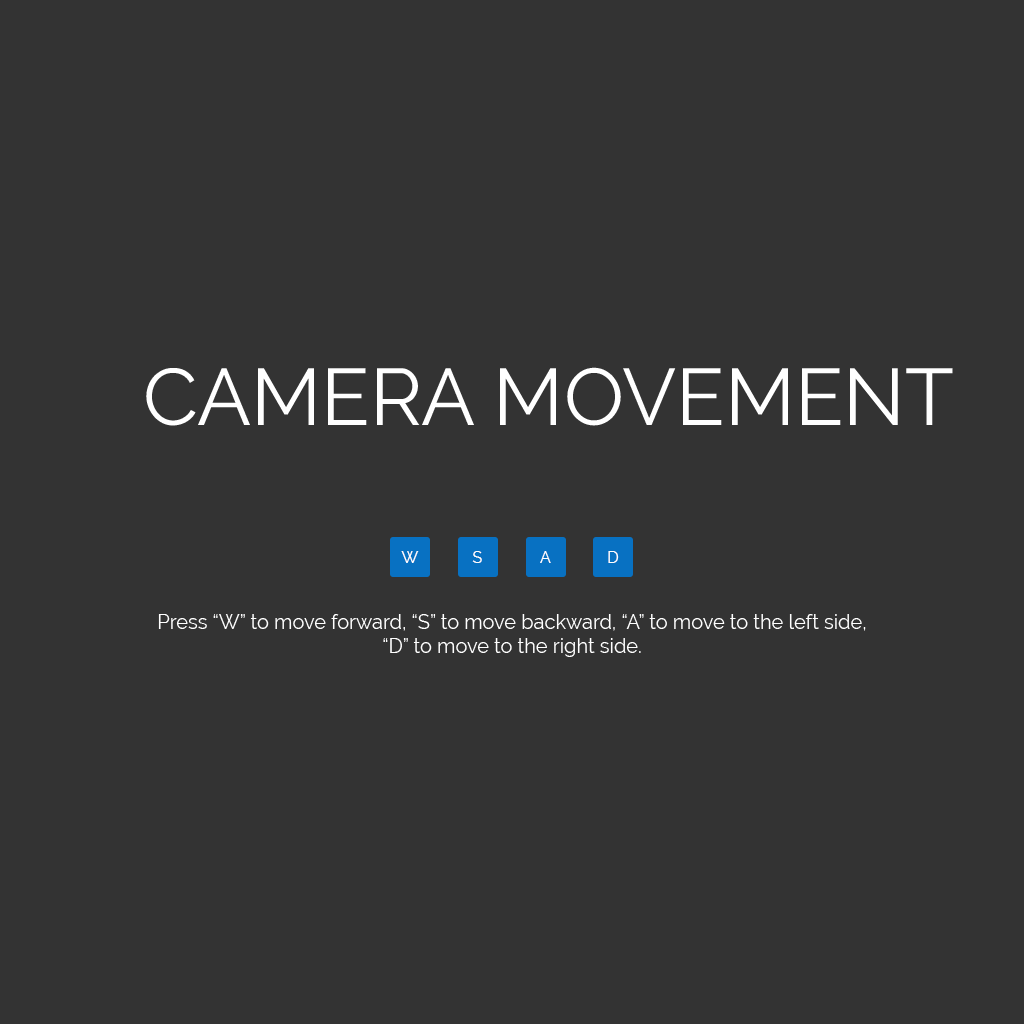
<style>
.page{position:relative;width:1024px;height:1024px;background:#333333}
.page>*{position:absolute;margin:0}
.t1{font:80px "Raleway-Regular";color:#ffffff}
.t2{font:15.7px "Raleway-Regular";color:#ffffff}
.t3{font:20px "Raleway-Regular";color:#ffffff}
</style>
<div class="page">
<p class="t1" style="left:146px;top:367px;width:807px;height:59px">CAMERA MOVEMENT</p>
<p class="t2" style="left:401px;top:551px;width:18px;height:12px">W</p>
<p class="t2" style="left:472px;top:551px;width:10px;height:12px">S</p>
<p class="t2" style="left:540px;top:551px;width:11px;height:12px">A</p>
<p class="t2" style="left:608px;top:551px;width:11px;height:12px">D</p>
<p class="t3" style="left:158px;top:614px;width:708px;height:43px;text-align:center">Press “W” to move forward, “S” to move backward, “A” to move to the left side,<br>“D” to move to the right side.</p>
</div>
